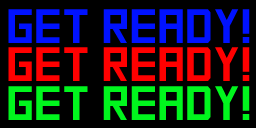
<style>
.page{position:relative;width:256px;height:128px;background:#000000}
.page>*{position:absolute;margin:0}
.t1{font:48px "SquareFont";color:#0012ff;text-transform:uppercase}
.t2{font:48px "SquareFont";color:#ff0000;text-transform:uppercase}
.t3{font:48px "SquareFont";color:#00f61d;text-transform:uppercase}
</style>
<div class="page">
<p class="t1" style="left:8px;top:9px;width:242px;height:34px">GET READY!</p>
<p class="t2" style="left:8px;top:47px;width:242px;height:34px">GET READY!</p>
<p class="t3" style="left:8px;top:86px;width:242px;height:34px">GET READY!</p>
</div>
